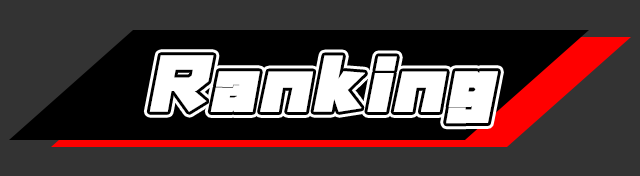
<style>
.page{position:relative;width:640px;height:176px;background:#333333}
.page>*{position:absolute;margin:0}
.t1{font:60px "GN-KMBFont-UB-OldstyleKana";letter-spacing:0.05em;color:#ffffff;font-weight:bold;font-style:italic;scale:1.1 1}
</style>
<div class="page">
<p class="t1" style="left:149px;top:55px;width:349px;height:69px">Ranking</p>
</div>
